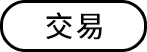
<style>
.page{position:relative;width:147px;height:52px;background:#ffffff}
.page>*{position:absolute;margin:0}
.t1{font:29.2px "NotoSansCJKtc-Medium";letter-spacing:0.06em;color:#060606}
</style>
<div class="page">
<p class="t1" style="left:46px;top:12px;width:56px;height:28px">交易</p>
</div>
